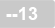
<style>
.page{position:relative;width:55px;height:28px;background:#c9c9c9}
.page>*{position:absolute;margin:0}
.t1{font:18.2px "Arial-BoldMT";color:#ffffff}
</style>
<div class="page">
<p class="t1" style="left:6px;top:7px;width:32px;height:13px">--13</p>
</div>
